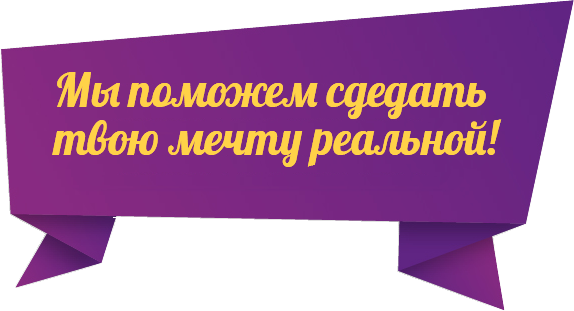
<style>
.page{position:relative;width:574px;height:311px;background:#ffffff}
.page>*{position:absolute;margin:0}
.t1{font:45.9px/47.9px "Lobster-Regular";color:#ffd248}
</style>
<div class="page">
<p class="t1" style="left:52px;top:72px;width:450px;height:95px;text-align:center">Мы поможем сдедать<br> твою мечту реальной!</p>
<p class="t1" style="left:52px;top:72px;width:450px;height:95px;text-align:center">Мы поможем сдедать<br> твою мечту реальной!</p>
</div>
